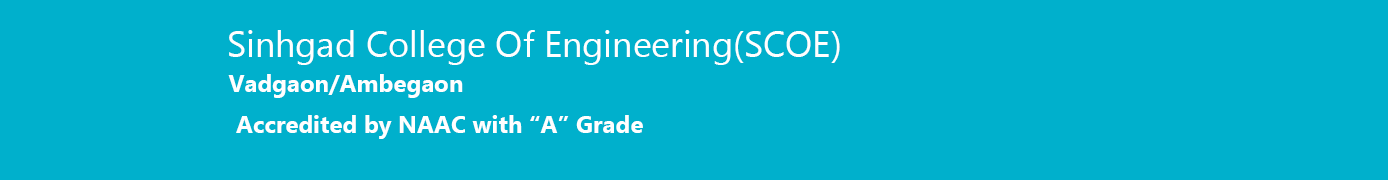
<style>
.page{position:relative;width:1388px;height:180px;background:#00b0cc}
.page>*{position:absolute;margin:0}
.t1{font:36px "MicrosoftNewTaiLue";color:#ffffff}
.t2{font:24px "MicrosoftNewTaiLue-Bold";color:#ffffff}
</style>
<div class="page">
<p class="t1" style="left:229px;top:30px;width:611px;height:35px">Sinhgad College Of Engineering(SCOE)</p>
<p class="t2" style="left:228px;top:74px;width:235px;height:24px">Vadgaon/Ambegaon</p>
<p class="t2" style="left:236px;top:115px;width:407px;height:24px">Accredited by NAAC with “A” Grade</p>
</div>
